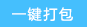
<style>
.page{position:relative;width:87px;height:27px;background:#45bffd}
.page>*{position:absolute;margin:0}
.t1{font:14px "MicrosoftYaHei";letter-spacing:0.12em;color:#ffffff}
</style>
<div class="page">
<p class="t1" style="left:12px;top:7px;width:61px;height:15px">一键打包</p>
</div>
